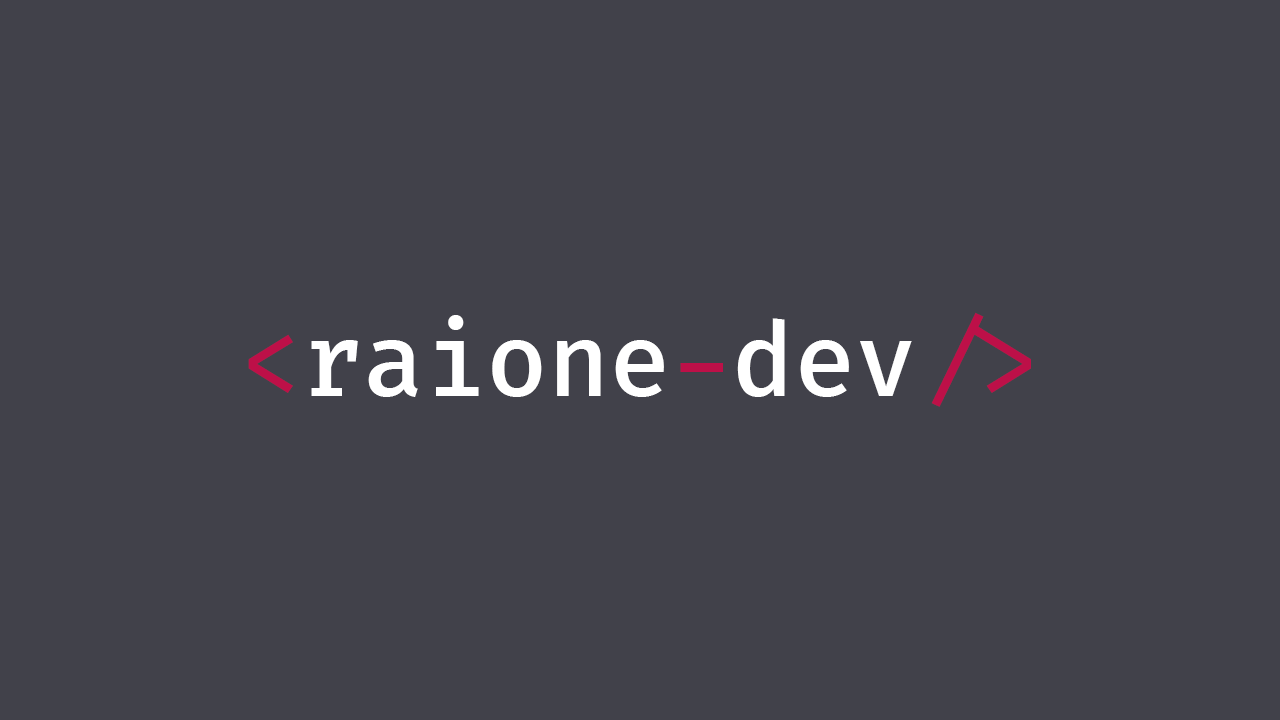
<style>
.page{position:relative;width:1280px;height:720px;background:#41414a}
.page>*{position:absolute;margin:0}
.t1{font:100px "FiraCode-Medium";color:#ffffff}
.t2{font:100px "FiraCode-Retina";color:#bd1048}
.t3{font:100px "FiraCode-Medium";color:#bd1048}
</style>
<div class="page">
<p class="t1" style="left:248px;top:312px;width:783px;height:95px"><span class="t2">&lt;</span>raione<span class="t3">-</span>dev<span class="t2">/&gt;</span></p>
</div>
